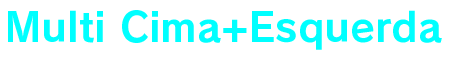
<style>
.page{position:relative;width:450px;height:60px;background:#ffffff}
.page>*{position:absolute;margin:0}
.t1{font:40px "RodinPro-B";color:#00ffff}
</style>
<div class="page">
<p class="t1" style="left:8px;top:10px;width:434px;height:40px">Multi Cima+Esquerda</p>
</div>
